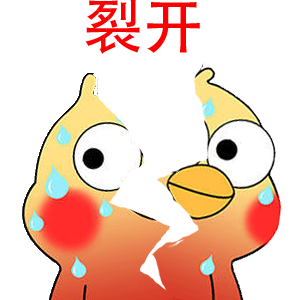
<style>
.page{position:relative;width:300px;height:300px;background:#ffffff}
.page>*{position:absolute;margin:0}
.t1{font:60px "AdobeHeitiStd-Regular";color:#fb0000}
</style>
<div class="page">
<p class="t1" style="left:85px;top:0px;width:115px;height:54px">裂开</p>
</div>
